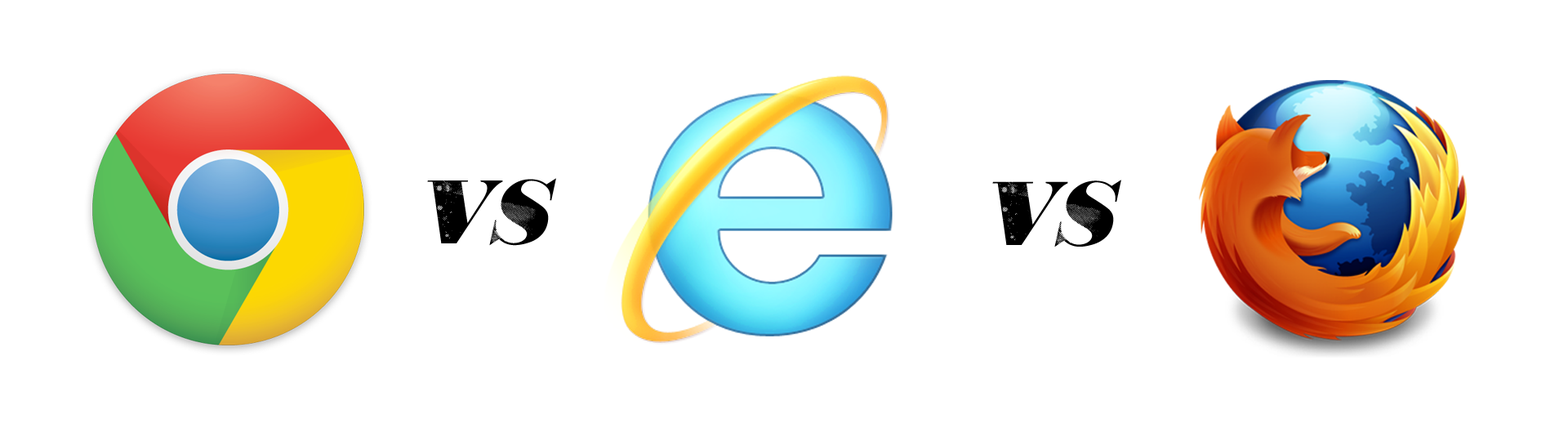
<style>
.page{position:relative;width:1568px;height:441px;background:#ffffff}
.page>*{position:absolute;margin:0}
.t1{font:137.5px "806Typography-806Typography";letter-spacing:-0.04em;color:#000000;font-variant:small-caps}
</style>
<div class="page">
<p class="t1" style="left:427px;top:178px;width:129px;height:68px">vs</p>
<p class="t1" style="left:992px;top:180px;width:129px;height:67px">vs</p>
</div>
